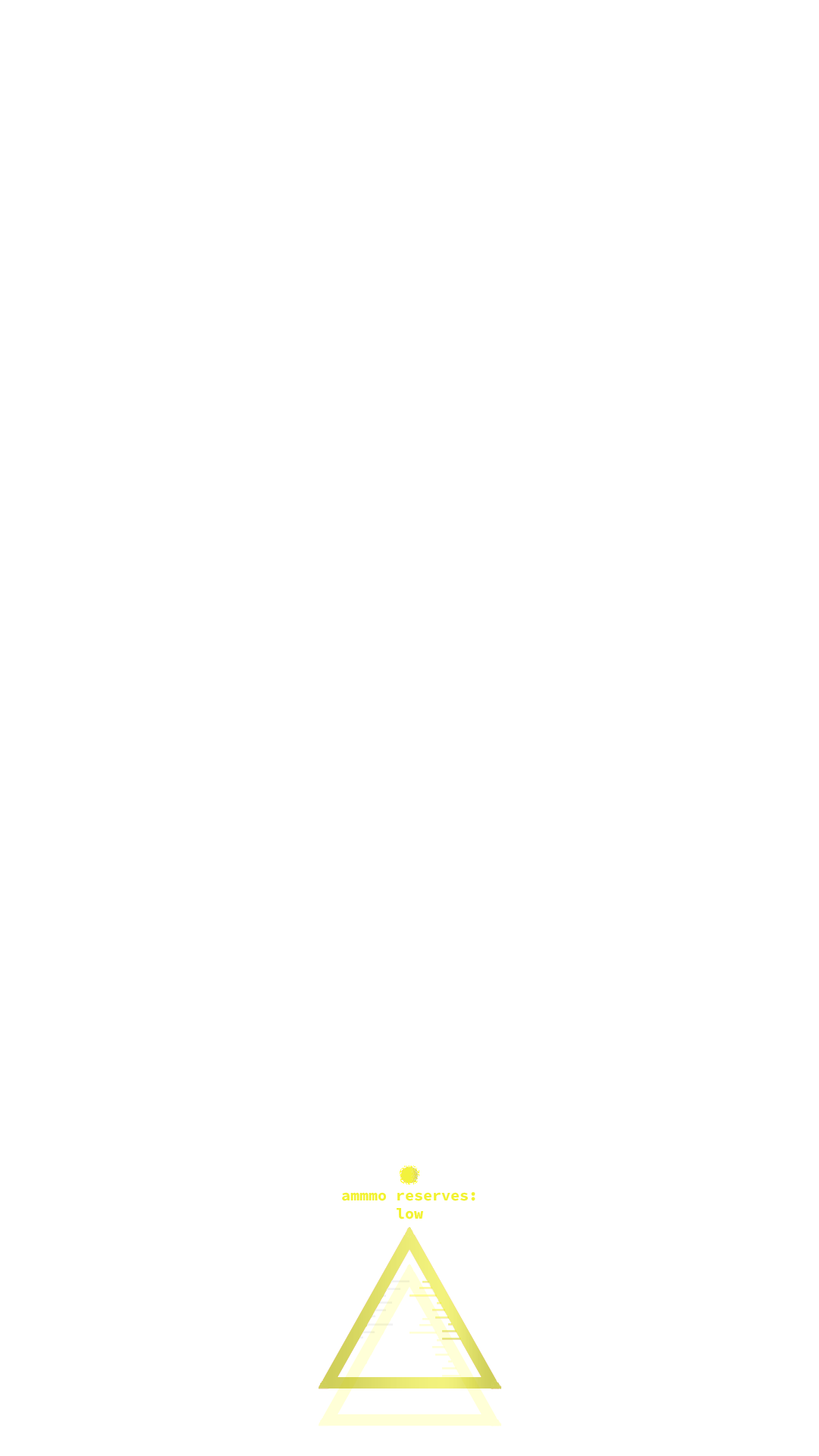
<style>
.page{position:relative;width:819px;height:1456px;background:#ffffff}
.page>*{position:absolute;margin:0}
.t1{font:15.2px "SourceCodeRoman-Bold";color:#f2f230}
</style>
<div class="page">
<p class="t1" style="left:342px;top:1192px;width:133px;height:27px;text-align:center">ammmo reserves: <br>low</p>
</div>
